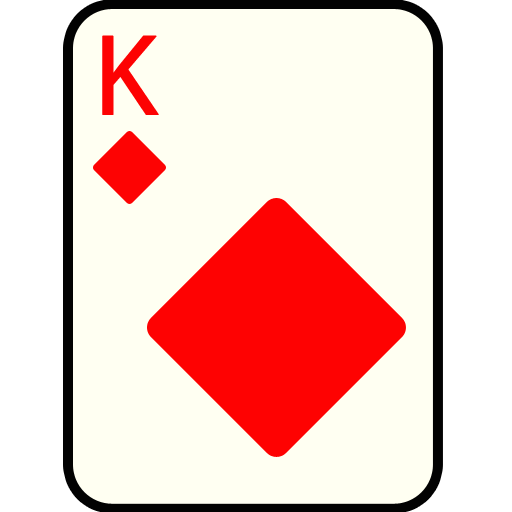
<style>
.page{position:relative;width:512px;height:512px;background:#fffff2}
.page>*{position:absolute;margin:0}
.t1{font:200px "MyriadPro-Regular";letter-spacing:-0.05em;color:#fd0202;font-variant:small-caps;font-weight:bold}
</style>
<div class="page">
<p class="t1" style="left:102px;top:35px;width:57px;height:80px">K</p>
</div>
